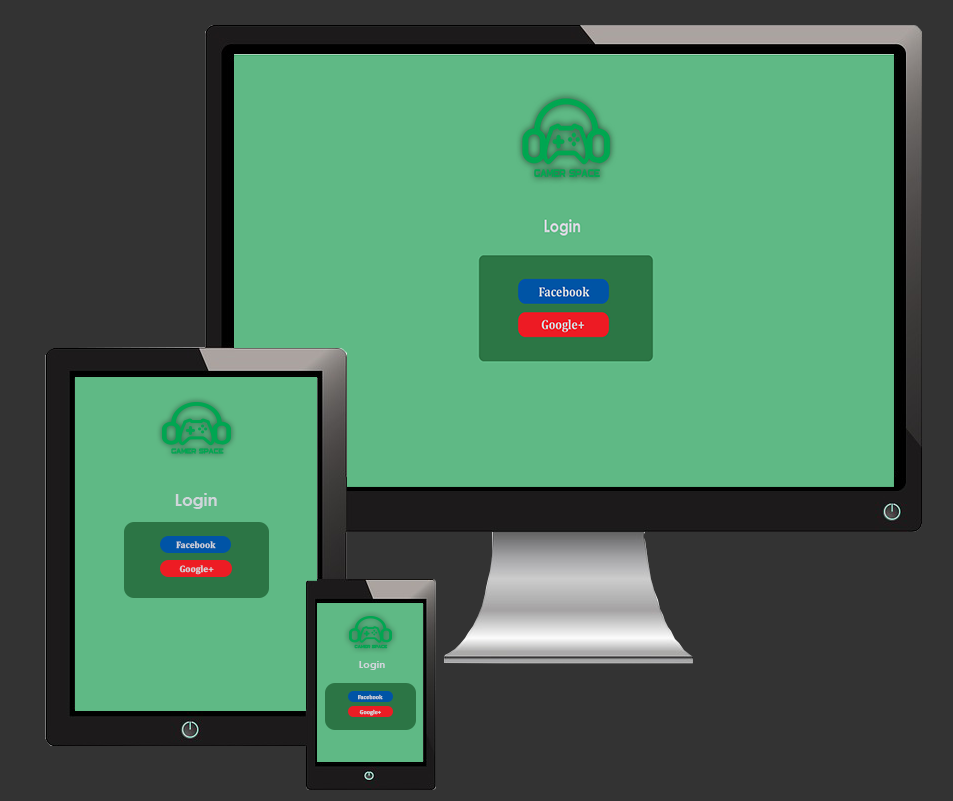
<style>
.page{position:relative;width:953px;height:801px;background:#5fb985}
.page>*{position:absolute;margin:0}
.t1{font:16.6px "CenturyGothic-Bold";color:#d1d6db}
.t2{font:9.3px "Cambria-Bold";color:#d1d6db}
.t3{font:10.3px "CenturyGothic-Bold";color:#d1d6db}
.t4{font:5.8px "Cambria-Bold";color:#d1d6db}
</style>
<div class="page">
<p class="t1" style="left:175px;top:493px;width:42px;height:16px">Login</p>
<p class="t2" style="left:176px;top:541px;width:40px;height:8px">Facebook</p>
<p class="t2" style="left:179px;top:565px;width:35px;height:10px">Google+</p>
<p class="t3" style="left:359px;top:661px;width:26px;height:9px">Login</p>
<p class="t4" style="left:358px;top:694px;width:25px;height:6px">Facebook</p>
<p class="t4" style="left:359px;top:709px;width:22px;height:7px">Google+</p>
</div>
